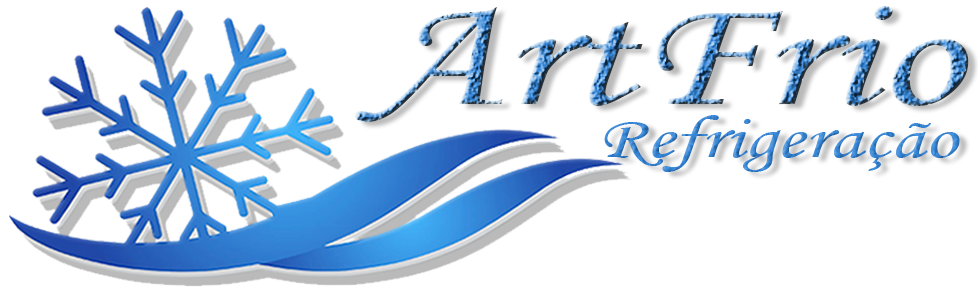
<style>
.page{position:relative;width:978px;height:294px;background:#ffffff}
.page>*{position:absolute;margin:0}
.t1{font:158.3px "MonotypeCorsiva";scale:1.36 1}
.t2{font:61px "MonotypeCorsiva";color:#3485d6;scale:1.34 1}
</style>
<div class="page">
<p class="t1" style="left:355px;top:6px;width:614px;height:116px">ArtFrio</p>
<p class="t2" style="left:604px;top:115px;width:356px;height:57px">Refrigeração</p>
</div>
